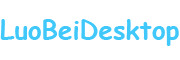
<style>
.page{position:relative;width:180px;height:60px;background:#ffffff}
.page>*{position:absolute;margin:0}
.t1{font:26px "ComicSansMS-Bold";color:#40c8fa}
</style>
<div class="page">
<p class="t1" style="left:0px;top:19px;width:179px;height:27px">LuoBeiDesktop</p>
</div>
